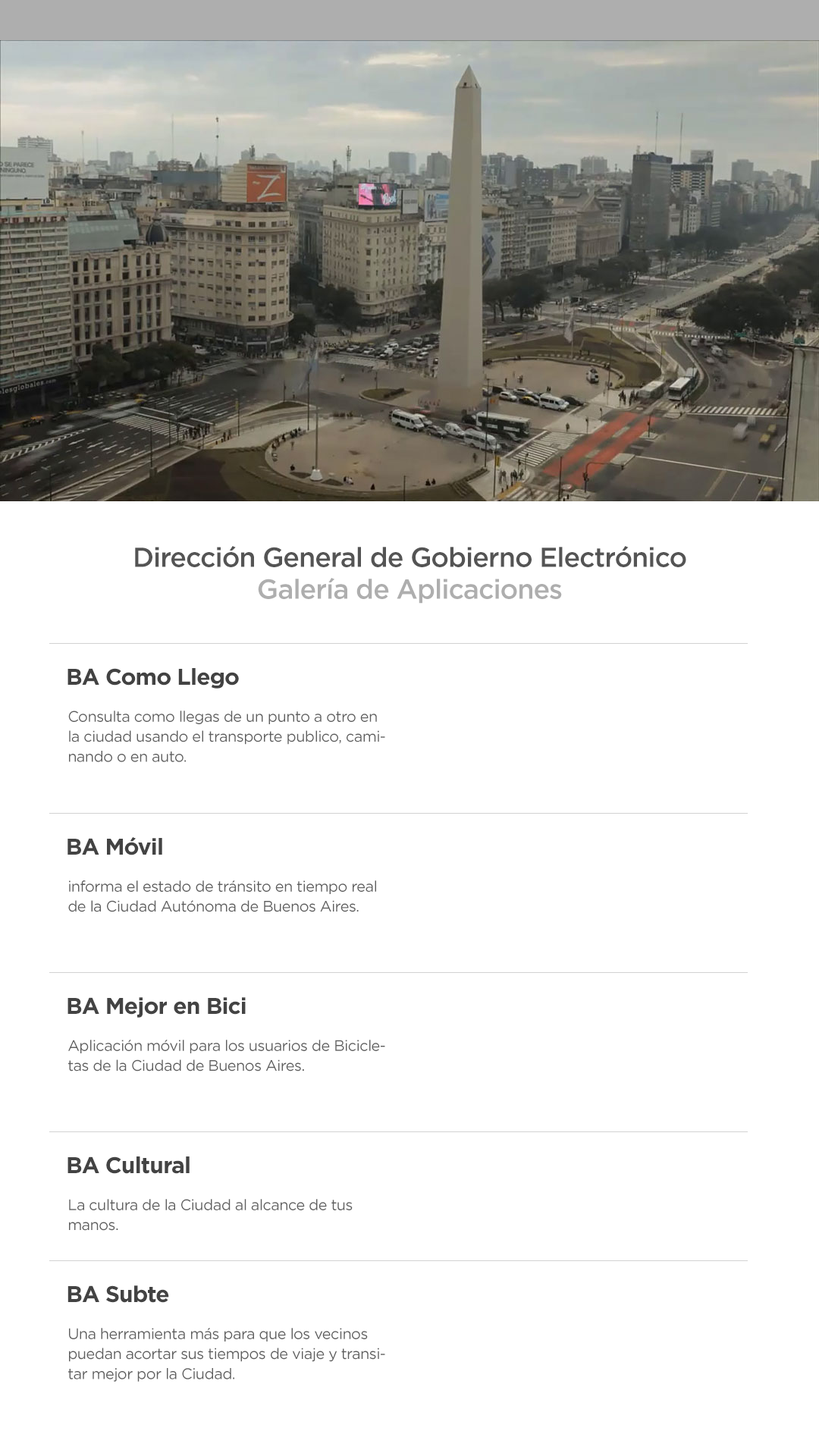
<style>
.page{position:relative;width:819px;height:1456px;background:#ffffff}
.page>*{position:absolute;margin:0}
.t1{font:27.3px "Gotham-Medium";letter-spacing:-0.03em;color:#555555}
.t2{font:27.3px "Gotham-Medium";letter-spacing:-0.03em;color:#aeaeae}
.t3{font:22.7px "Gotham-Bold";letter-spacing:-0.03em;color:#434343}
.t4{font:15.2px/20px "Gotham-Book";letter-spacing:-0.03em;color:#5e5e5e}
</style>
<div class="page">
<p class="t1" style="left:135px;top:546px;width:551px;height:21px">Dirección General de Gobierno Electrónico</p>
<p class="t2" style="left:258px;top:578px;width:304px;height:26px">Galería de Aplicaciones</p>
<p class="t3" style="left:67px;top:668px;width:172px;height:21px">BA Como Llego</p>
<p class="t4" style="left:68px;top:711px;width:317px;height:51px">Consulta como llegas de un punto a otro en la ciudad usando el transporte publico, caminando o en auto.</p>
<p class="t3" style="left:67px;top:837px;width:95px;height:18px">BA Móvil</p>
<p class="t4" style="left:68px;top:880px;width:308px;height:32px">informa el estado de tránsito en tiempo real de la Ciudad Autónoma de Buenos Aires.</p>
<p class="t3" style="left:67px;top:997px;width:179px;height:21px">BA Mejor en Bici</p>
<p class="t4" style="left:68px;top:1040px;width:317px;height:32px">Aplicación móvil para los usuarios de Bicicletas de la Ciudad de Buenos Aires.</p>
<p class="t3" style="left:67px;top:1156px;width:123px;height:18px">BA Cultural</p>
<p class="t4" style="left:69px;top:1199px;width:284px;height:32px">La cultura de la Ciudad al alcance de tus manos.</p>
<p class="t3" style="left:67px;top:1285px;width:102px;height:18px">BA Subte</p>
<p class="t4" style="left:68px;top:1328px;width:317px;height:54px">Una herramienta más para que los vecinos puedan acortar sus tiempos de viaje y transitar mejor por la Ciudad.</p>
</div>
